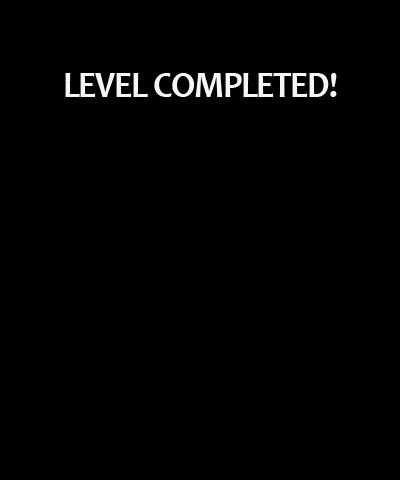
<style>
.page{position:relative;width:400px;height:480px;background:#000000}
.page>*{position:absolute;margin:0}
.t1{font:37.1px "Candara-Bold";letter-spacing:-0.04em;color:#f5f5f5;scale:0.94 1}
</style>
<div class="page">
<p class="t1" style="left:65px;top:73px;width:272px;height:24px">LEVEL COMPLETED!</p>
</div>
